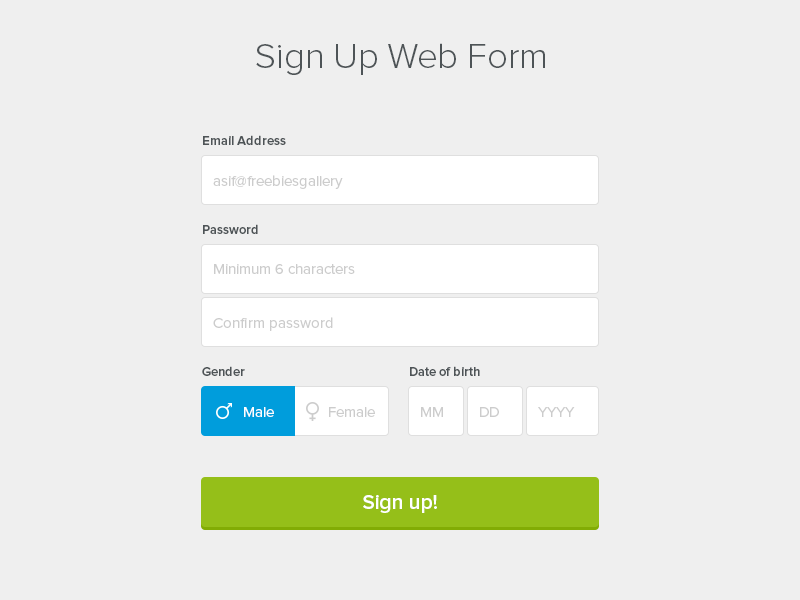
<style>
.page{position:relative;width:800px;height:600px;background:#efefef}
.page>*{position:absolute;margin:0}
.t1{font:36px "ProximaNova-Light";color:#4e5457}
.t2{font:13px "ProximaNova-Semibold";color:#4e5457}
.t3{font:15px "ProximaNova-Regular";color:#cccccc}
.t4{font:15px "ProximaNova-Regular";color:#ffffff}
.t5{font:21px "ProximaNova-Semibold";color:#ffffff}
</style>
<div class="page">
<p class="t1" style="left:256px;top:43px;width:289px;height:32px">Sign Up Web Form</p>
<p class="t2" style="left:203px;top:135px;width:83px;height:10px">Email Address</p>
<p class="t3" style="left:213px;top:175px;width:130px;height:14px">asif@freebiesgallery</p>
<p class="t2" style="left:203px;top:224px;width:55px;height:10px">Password</p>
<p class="t3" style="left:214px;top:264px;width:141px;height:10px">Minimum 6 characters</p>
<p class="t3" style="left:213px;top:317px;width:120px;height:14px">Confirm password</p>
<p class="t2" style="left:202px;top:366px;width:43px;height:10px">Gender</p>
<p class="t2" style="left:410px;top:366px;width:70px;height:10px">Date of birth</p>
<p class="t4" style="left:244px;top:407px;width:30px;height:10px">Male</p>
<p class="t3" style="left:329px;top:407px;width:46px;height:10px">Female</p>
<p class="t3" style="left:421px;top:407px;width:22px;height:10px">MM</p>
<p class="t3" style="left:480px;top:407px;width:19px;height:10px">DD</p>
<p class="t3" style="left:538px;top:407px;width:37px;height:10px">YYYY</p>
<p class="t5" style="left:363px;top:495px;width:74px;height:18px">Sign up!</p>
</div>
